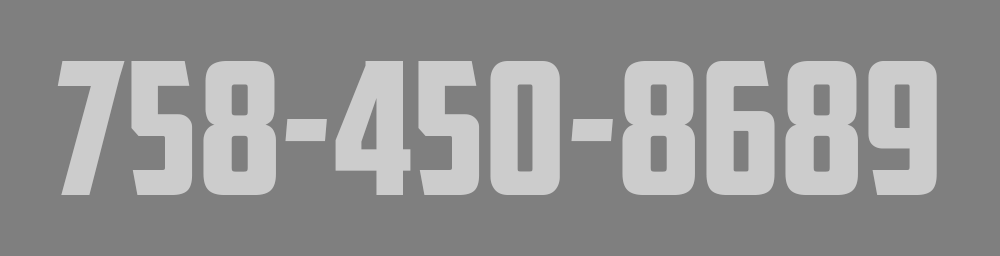
<style>
.page{position:relative;width:1000px;height:256px;background:#7f7f7f}
.page>*{position:absolute;margin:0}
.t1{font:185.2px "AmericanCaptain";color:#cccccc}
</style>
<div class="page">
<p class="t1" style="left:57px;top:61px;width:880px;height:134px">758-450-8689</p>
</div>
